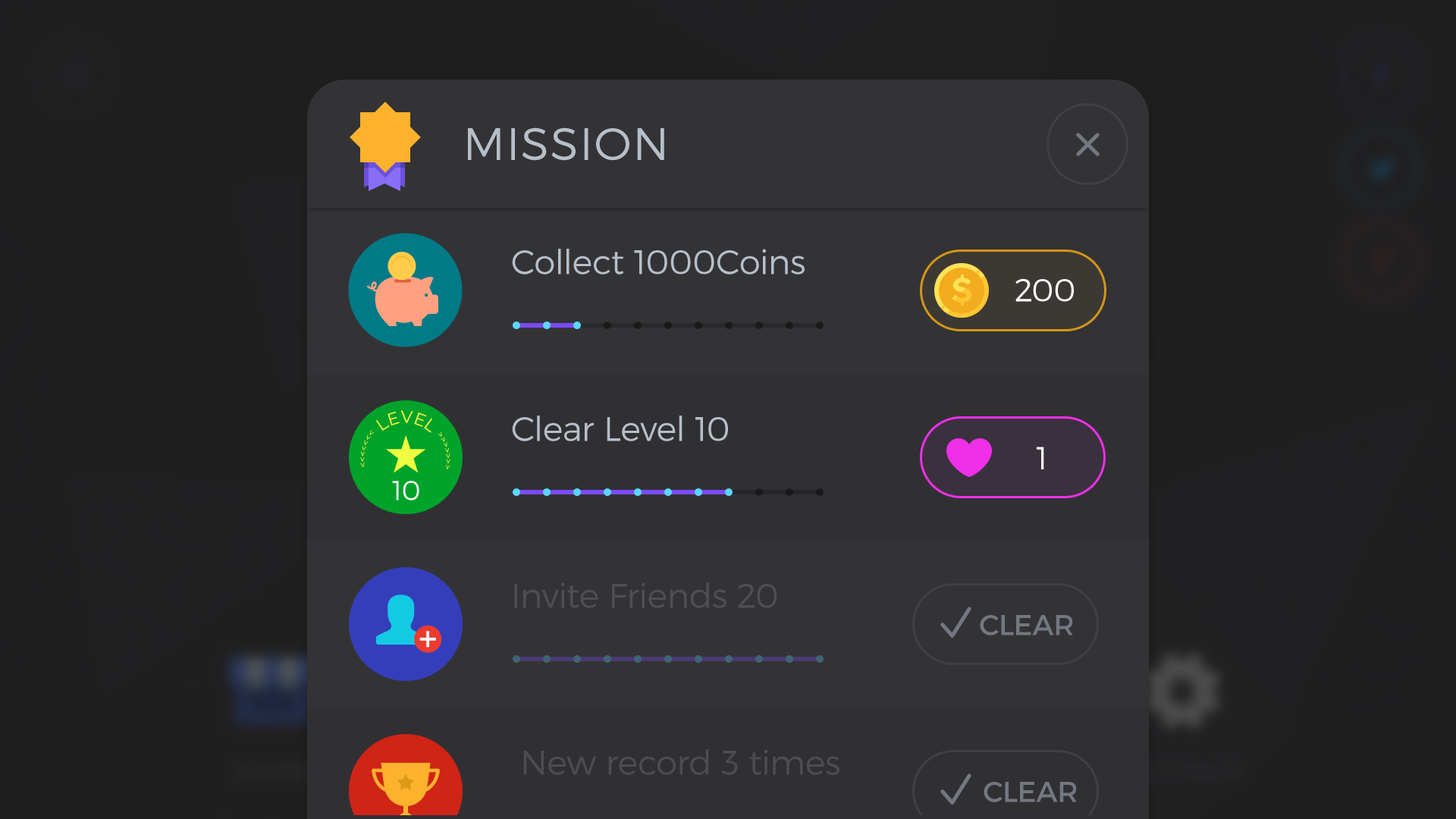
<style>
.page{position:relative;width:1456px;height:819px;background:#333336}
.page>*{position:absolute;margin:0}
.t1{font:45.5px "Montserrat-Light";letter-spacing:0.03em;color:#b6bfc9;text-transform:uppercase}
.t2{font:34.1px "Montserrat-Light";color:#b6bfc9}
.t3{font:31.8px "Montserrat-Light";color:#ffffff;text-transform:uppercase}
.t4{font:9.1px "Montserrat-Regular";color:#eeff41;text-transform:uppercase}
.t5{font:17.1px "Montserrat-Regular";color:#eeff41;text-transform:uppercase}
.t6{font:27.3px "Montserrat-Light";color:#ffffff}
.t7{font:34.1px "Montserrat-Light";color:#4d4f53}
.t8{font:28.8px "Montserrat-Regular";color:#737781;text-transform:uppercase}
.t9{font:34.1px "Montserrat-Light";color:#4b4d51}
</style>
<div class="page">
<p class="t1" style="left:468px;top:127px;width:196px;height:34px">mission</p>
<p class="t2" style="left:512px;top:249px;width:293px;height:26px">Collect 1000Coins</p>
<p class="t3" style="left:1015px;top:278px;width:59px;height:24px">200</p>
<p class="t4" style="left:360px;top:410px;width:90px;height:59px;rotate:1deg">&lt;&lt;&lt;&lt;&lt;&lt;&lt;<span class="t5"> level </span>&gt;&gt;&gt;&gt;&gt;&gt;&gt;</p>
<p class="t2" style="left:512px;top:416px;width:216px;height:25px">Clear Level 10</p>
<p class="t3" style="left:1037px;top:447px;width:7px;height:22px">1</p>
<p class="t6" style="left:392px;top:481px;width:27px;height:19px">10</p>
<p class="t7" style="left:514px;top:582px;width:263px;height:26px">Invite Friends 20</p>
<p class="t8" style="left:980px;top:615px;width:93px;height:20px">CLEAR</p>
<p class="t9" style="left:523px;top:749px;width:316px;height:26px">New record 3 times</p>
<p class="t8" style="left:984px;top:782px;width:93px;height:20px">CLEAR</p>
</div>
